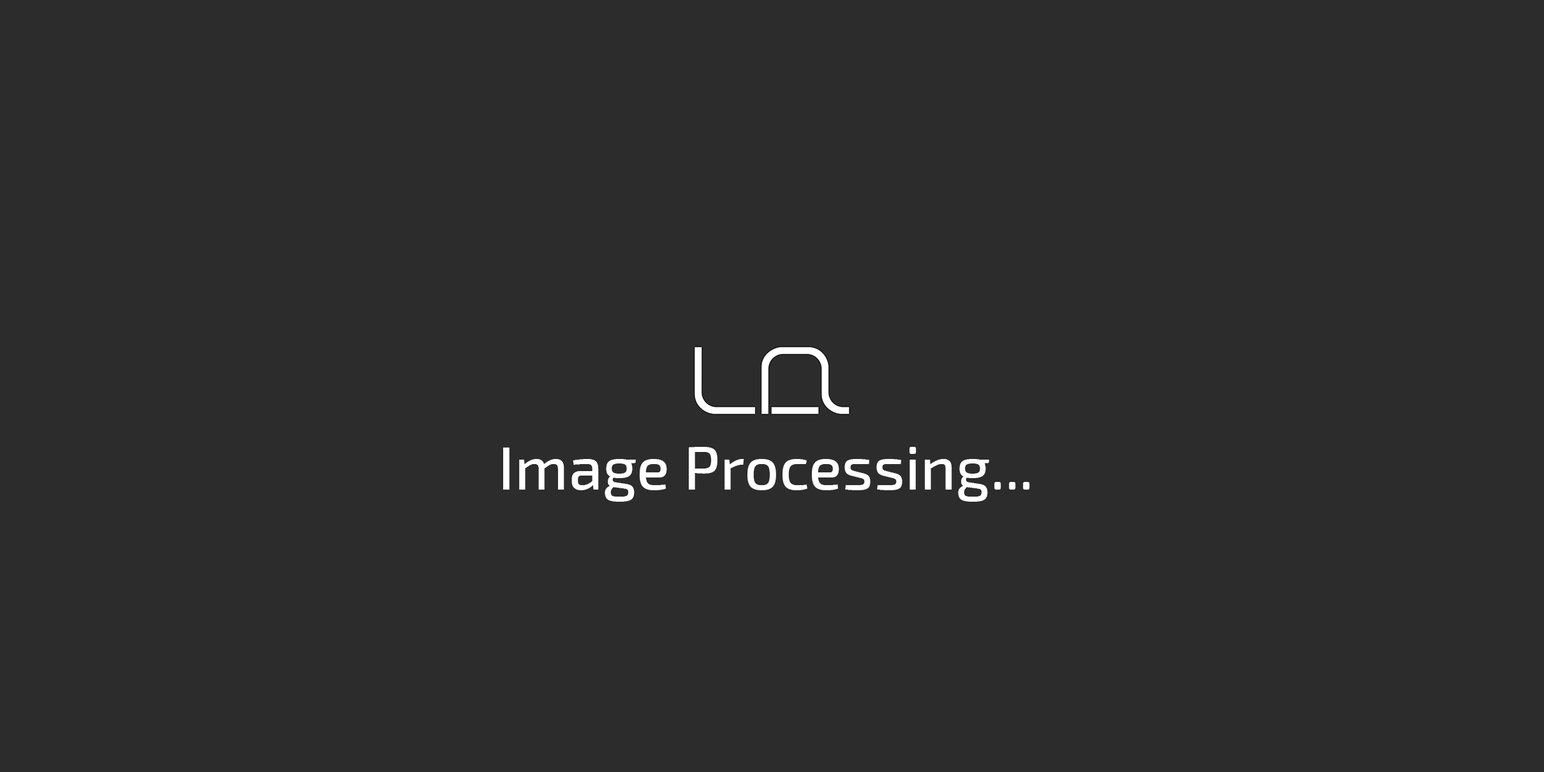
<style>
.page{position:relative;width:1544px;height:772px;background:#2c2c2c}
.page>*{position:absolute;margin:0}
.t1{font:61.5px "Exo2-Medium";color:#ffffff}
</style>
<div class="page">
<p class="t1" style="left:503px;top:447px;width:527px;height:55px">Image Processing...</p>
</div>
